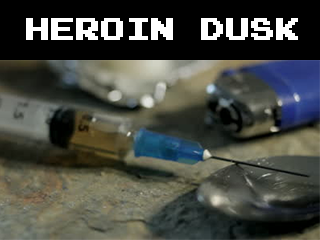
<style>
.page{position:relative;width:320px;height:240px;background:#000000}
.page>*{position:absolute;margin:0}
.t1{font:24px "Emulogic";color:#ffffff;font-weight:bold}
</style>
<div class="page">
<p class="t1" style="left:26px;top:18px;width:272px;height:22px">HEROIN DUSK</p>
</div>
